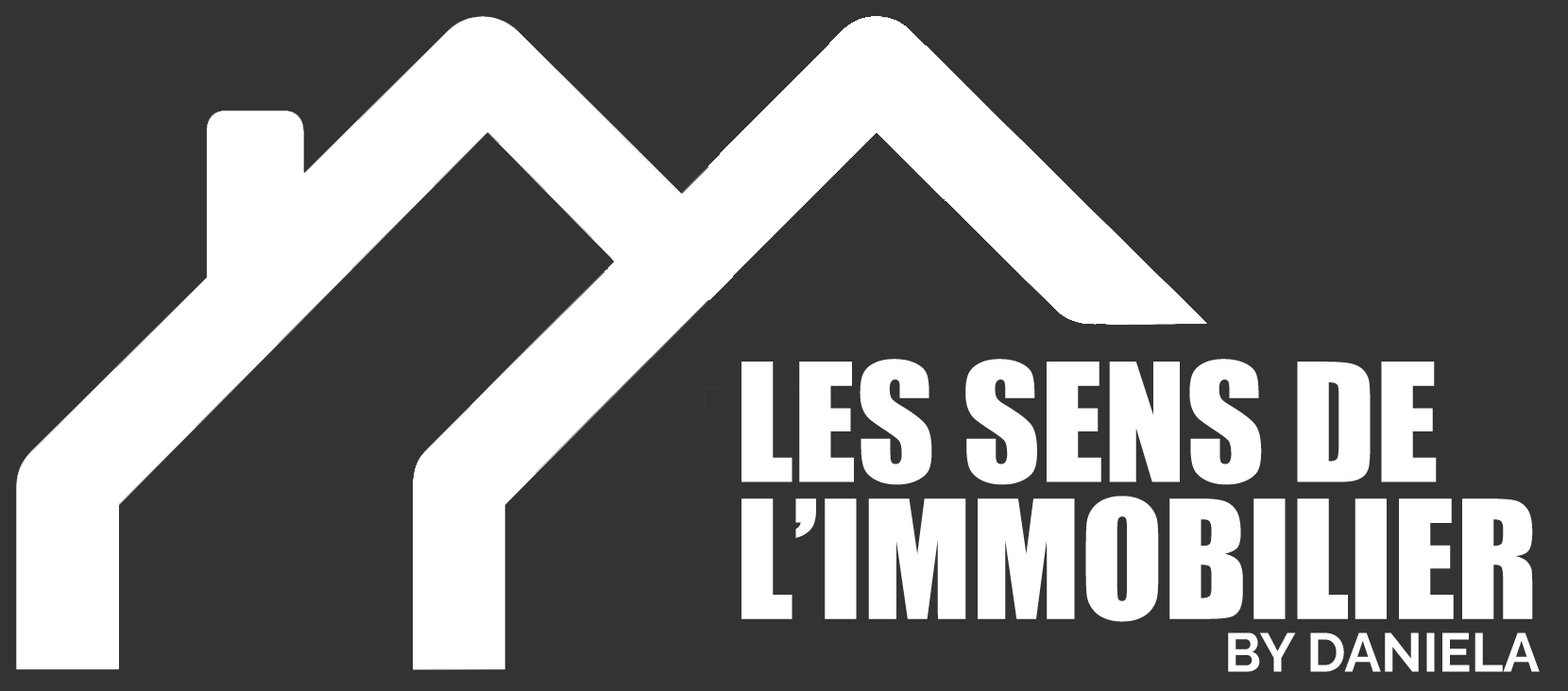
<style>
.page{position:relative;width:1568px;height:691px;background:#333333}
.page>*{position:absolute;margin:0}
.t1{font:152px/137px "Impact";color:#ffffff;text-transform:uppercase}
.t2{font:54.6px "Raleway-Bold";color:#ffffff;text-transform:uppercase}
</style>
<div class="page">
<p class="t1" style="left:741px;top:359px;width:792px;height:263px">LES SENS DE<br>L’Immobilier</p>
<p class="t2" style="left:1228px;top:633px;width:312px;height:40px">By DAniela</p>
</div>
